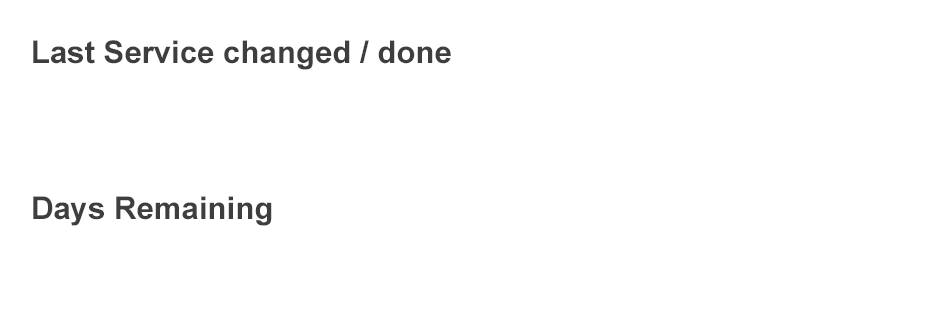
<style>
.page{position:relative;width:925px;height:335px;background:#ffffff}
.page>*{position:absolute;margin:0}
.t1{font:31.2px "Arial-BoldMT";color:#3e3e3e}
</style>
<div class="page">
<p class="t1" style="left:33px;top:40px;width:418px;height:30px">Last Service changed / done</p>
<p class="t1" style="left:33px;top:196px;width:239px;height:30px">Days Remaining</p>
</div>
